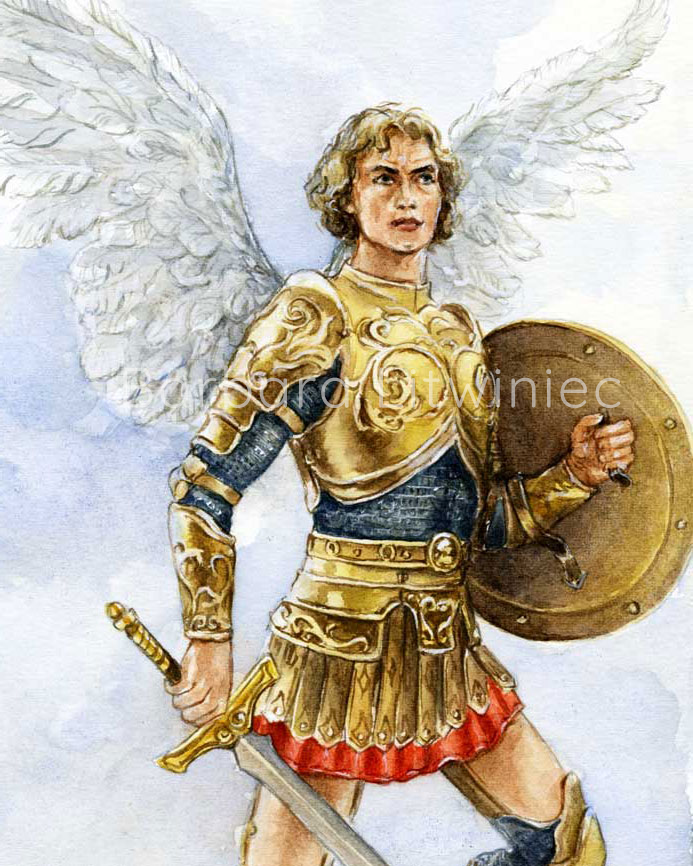
<style>
.page{position:relative;width:693px;height:866px}
.page>*{position:absolute;margin:0}
.t1{font:57px "Quicksand-Regular";letter-spacing:0.05em}
</style>
<div class="page">
<p class="t1" style="left:123px;top:365px;width:498px;height:43px">Barbara Litwiniec</p>
</div>
